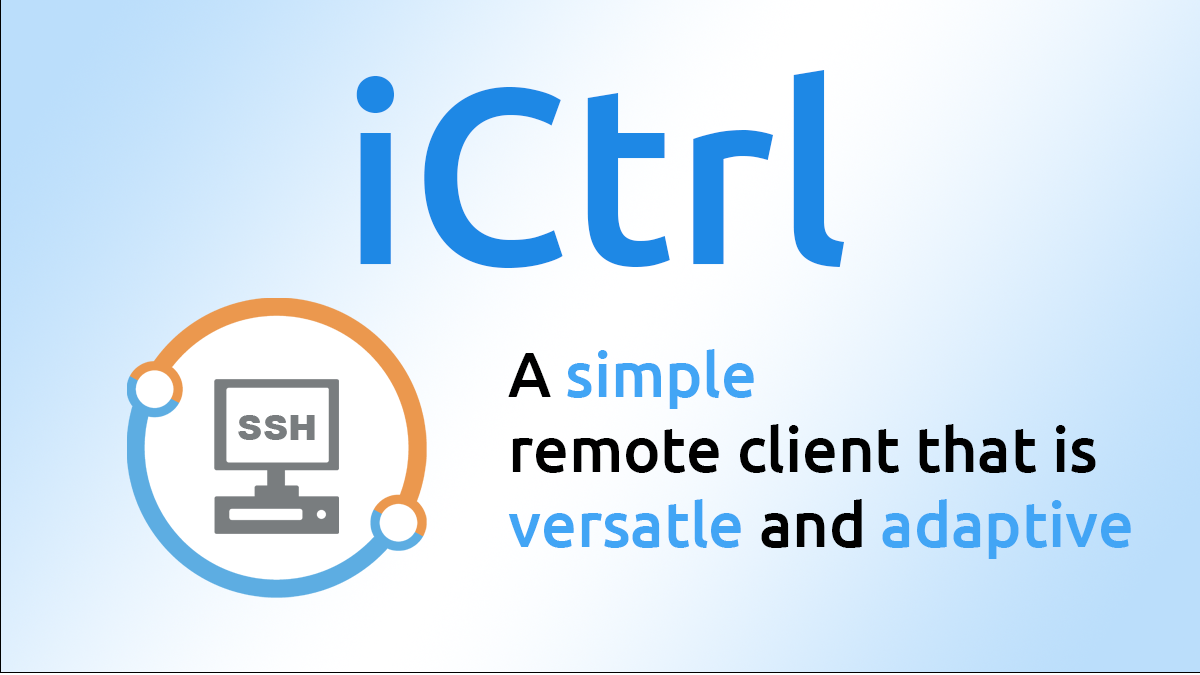
<style>
.page{position:relative;width:1200px;height:675px}
.page>*{position:absolute;margin:0}
.t1{font:250px "Ubuntu-Medium";color:#1e88e5}
.t2{font:62.5px "Ubuntu-Medium";color:#000000}
.t3{font:62.5px "Ubuntu-Medium";color:#42a5f5}
.t4{font:35.2px "Arial-Black";color:#797d7f}
</style>
<div class="page">
<p class="t1" style="left:356px;top:70px;width:488px;height:198px">iCtrl</p>
<p class="t2" style="left:508px;top:349px;width:623px;height:210px">A <span class="t3">simple</span> <br>remote client that is <br><span class="t3">versatle</span> and <span class="t3">adaptive</span></p>
<p class="t4" style="left:238px;top:415px;width:77px;height:25px">SSH</p>
</div>
